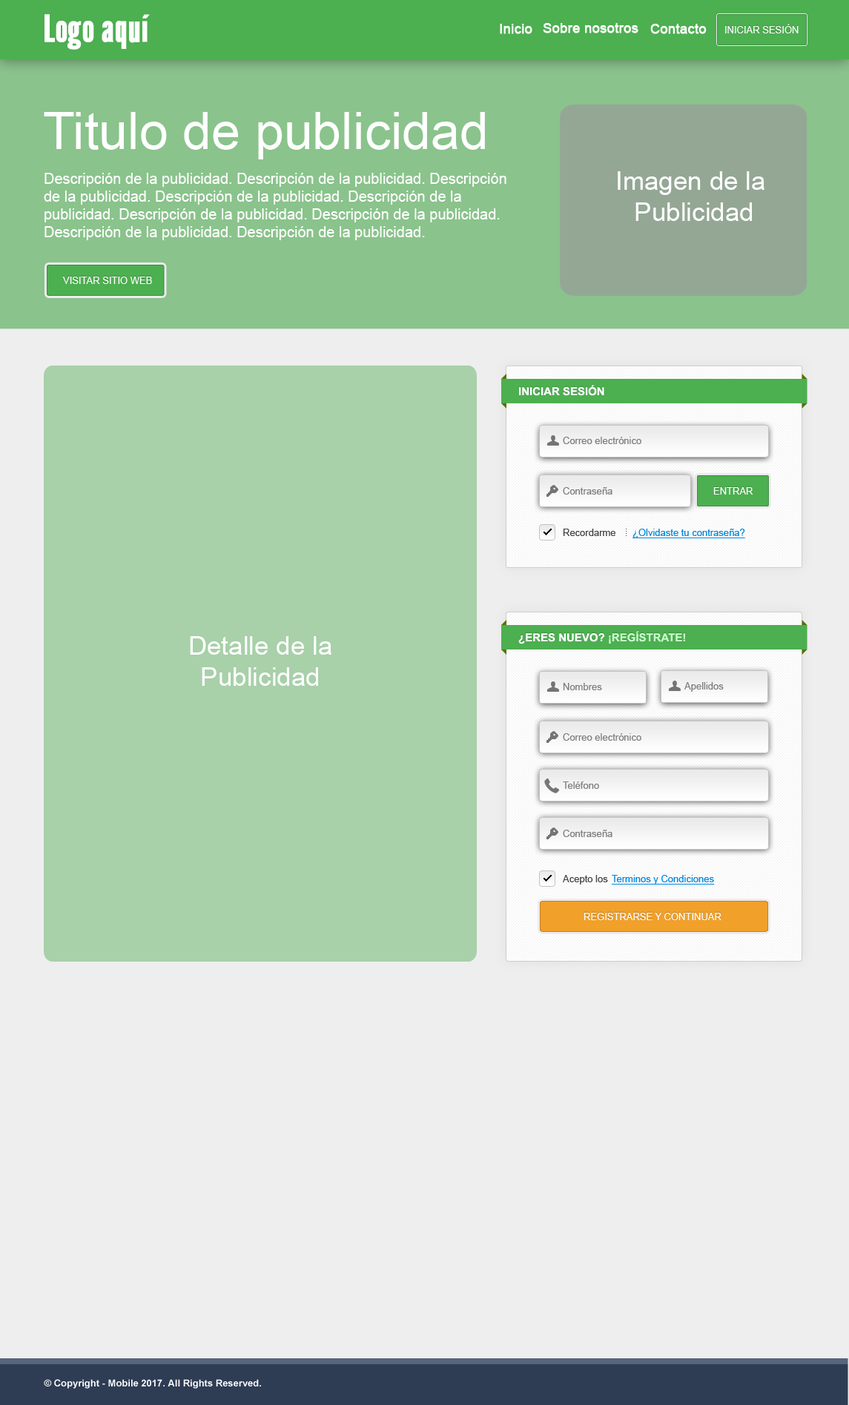
<style>
.page{position:relative;width:849px;height:1405px;background:#eeeeee}
.page>*{position:absolute;margin:0}
.t1{font:37.1px "LeagueGothic-Regular";color:#ffffff;font-weight:bold}
.t2{font:13.3px "ArialMT";color:#ffffff;font-weight:bold}
.t3{font:9.6px "ArialMT";color:#ffffff;text-transform:uppercase}
.t4{font:51.9px "ArialMT";color:#ffffff}
.t5{font:14.8px "ArialMT";color:#ffffff}
.t6{font:25.9px "ArialMT";color:#ffffff}
.t7{font:11.1px "Arial-BoldMT";color:#ffffff;text-transform:uppercase}
.t8{font:9.6px "ArialMT";color:#7e7e7e}
.t9{font:9.6px "ArialMT";color:#464646}
.t10{font:9.6px "ArialMT";color:#0088de;text-decoration:underline}
.t11{font:11.1px "Arial-BoldMT";color:#c9ffcb;text-transform:uppercase}
.t12{font:9.6px "Arial-BoldMT";color:#ffffff}
</style>
<div class="page">
<p class="t1" style="left:44px;top:14px;width:106px;height:36px">Logo aquí</p>
<p class="t2" style="left:500px;top:24px;width:32px;height:10px">Inicio</p>
<p class="t2" style="left:543px;top:23px;width:95px;height:10px">Sobre nosotros</p>
<p class="t2" style="left:650px;top:24px;width:56px;height:10px">Contacto</p>
<p class="t3" style="left:725px;top:24px;width:73px;height:9px">Iniciar Sesión</p>
<p class="t4" style="left:44px;top:112px;width:441px;height:47px">Titulo de publicidad</p>
<p class="t5" style="left:44px;top:173px;width:462px;height:67px">Descripción de la publicidad. Descripción de la publicidad. Descripción de la publicidad. Descripción de la publicidad. Descripción de la publicidad. Descripción de la publicidad. Descripción de la publicidad. Descripción de la publicidad. Descripción de la publicidad.</p>
<p class="t6" style="left:618px;top:171px;width:146px;height:50px;text-align:center">Imagen de la<br> Publicidad</p>
<p class="t3" style="left:62px;top:277px;width:90px;height:7px">Visitar sitio web</p>
<p class="t7" style="left:519px;top:385px;width:85px;height:11px">Iniciar Sesión</p>
<p class="t8" style="left:563px;top:437px;width:78px;height:7px">Correo electrónico</p>
<p class="t8" style="left:563px;top:487px;width:49px;height:7px">Contraseña</p>
<p class="t3" style="left:713px;top:487px;width:40px;height:7px">Entrar</p>
<p class="t9" style="left:563px;top:529px;width:52px;height:7px">Recordarme</p>
<p class="t10" style="left:632px;top:529px;width:113px;height:9px">¿Olvidaste tu contraseña?</p>
<p class="t6" style="left:190px;top:636px;width:141px;height:50px;text-align:center">Detalle de la<br>Publicidad</p>
<p class="t7" style="left:518px;top:631px;width:167px;height:13px">¿Eres nuevo? <span class="t11">¡Regístrate!</span></p>
<p class="t8" style="left:563px;top:683px;width:39px;height:7px">Nombres</p>
<p class="t8" style="left:684px;top:682px;width:40px;height:10px">Apellidos</p>
<p class="t8" style="left:563px;top:733px;width:78px;height:8px">Correo electrónico</p>
<p class="t8" style="left:563px;top:781px;width:36px;height:8px">Teléfono</p>
<p class="t8" style="left:563px;top:830px;width:49px;height:7px">Contraseña</p>
<p class="t9" style="left:563px;top:875px;width:45px;height:9px">Acepto los</p>
<p class="t10" style="left:612px;top:875px;width:103px;height:9px">Terminos y Condiciones</p>
<p class="t3" style="left:583px;top:913px;width:138px;height:7px">registrarse y Continuar</p>
<p class="t12" style="left:44px;top:1379px;width:217px;height:10px">© Copyright - Mobile 2017. All Rights Reserved.</p>
</div>
